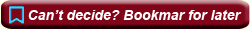
<style>
.page{position:relative;width:250px;height:30px;background:#800519}
.page>*{position:absolute;margin:0}
.t1{font:14px "Arial-BoldItalicMT";color:#ffffff}
</style>
<div class="page">
<p class="t1" style="left:28px;top:10px;width:214px;height:10px">Can’t decide? Bookmar for later</p>
</div>
